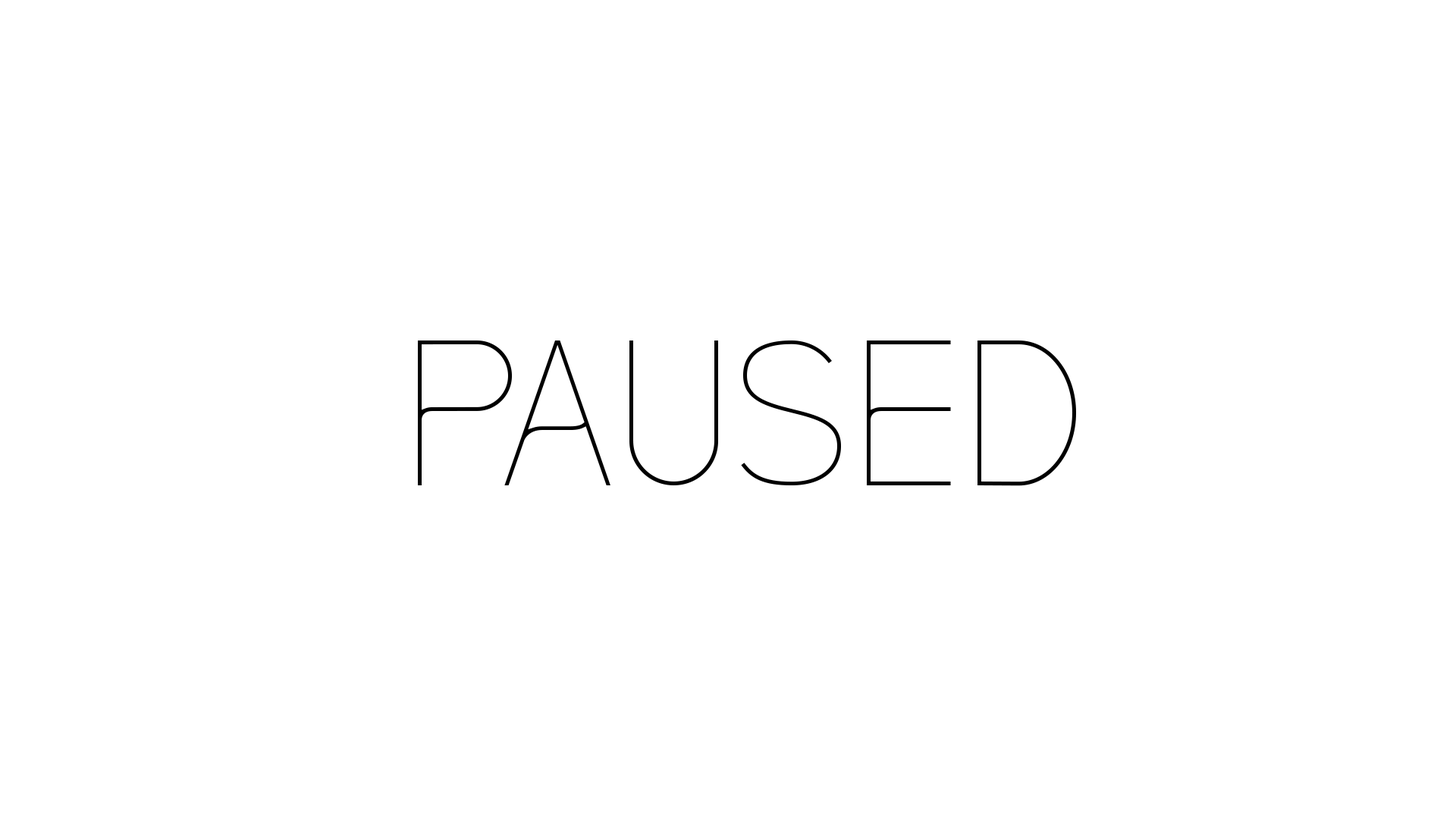
<style>
.page{position:relative;width:1456px;height:819px;background:#ffffff}
.page>*{position:absolute;margin:0}
.t1{font:191.9px "Kirvy-Thin";color:#000000}
</style>
<div class="page">
<p class="t1" style="left:418px;top:340px;width:658px;height:146px">PAUSED</p>
</div>
